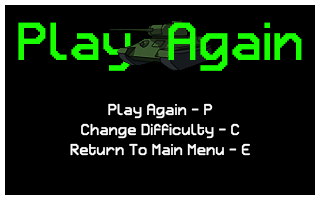
<style>
.page{position:relative;width:320px;height:200px;background:#000000}
.page>*{position:absolute;margin:0}
.t1{font:48px "Retron2000";color:#18ff00}
.t2{font:14px "Retron2000";color:#ffffff}
</style>
<div class="page">
<p class="t1" style="left:18px;top:22px;width:113px;height:49px">Play</p>
<p class="t1" style="left:168px;top:22px;width:134px;height:49px">Again</p>
<p class="t2" style="left:108px;top:103px;width:105px;height:16px">Play Again - P</p>
<p class="t2" style="left:81px;top:123px;width:159px;height:16px">Change Difficulty - C</p>
<p class="t2" style="left:70px;top:143px;width:180px;height:13px">Return To Main Menu - E</p>
</div>
